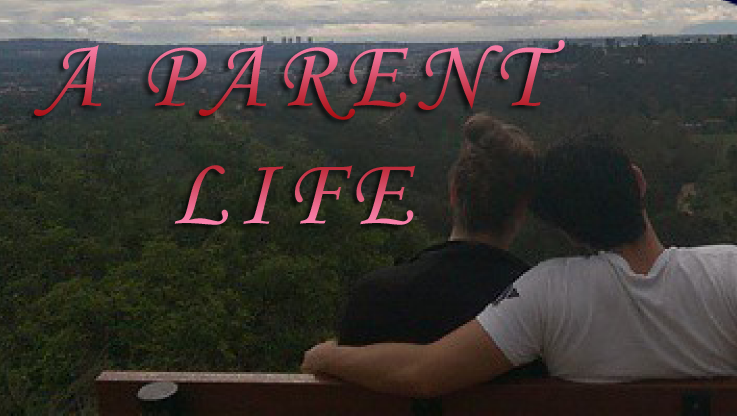
<style>
.page{position:relative;width:737px;height:416px}
.page>*{position:absolute;margin:0}
.t1{font:98.1px "MonotypeCorsiva";letter-spacing:0.1em}
</style>
<div class="page">
<p class="t1" style="left:34px;top:40px;width:531px;height:185px;text-align:center">A PARENT <br>LIFE</p>
</div>
